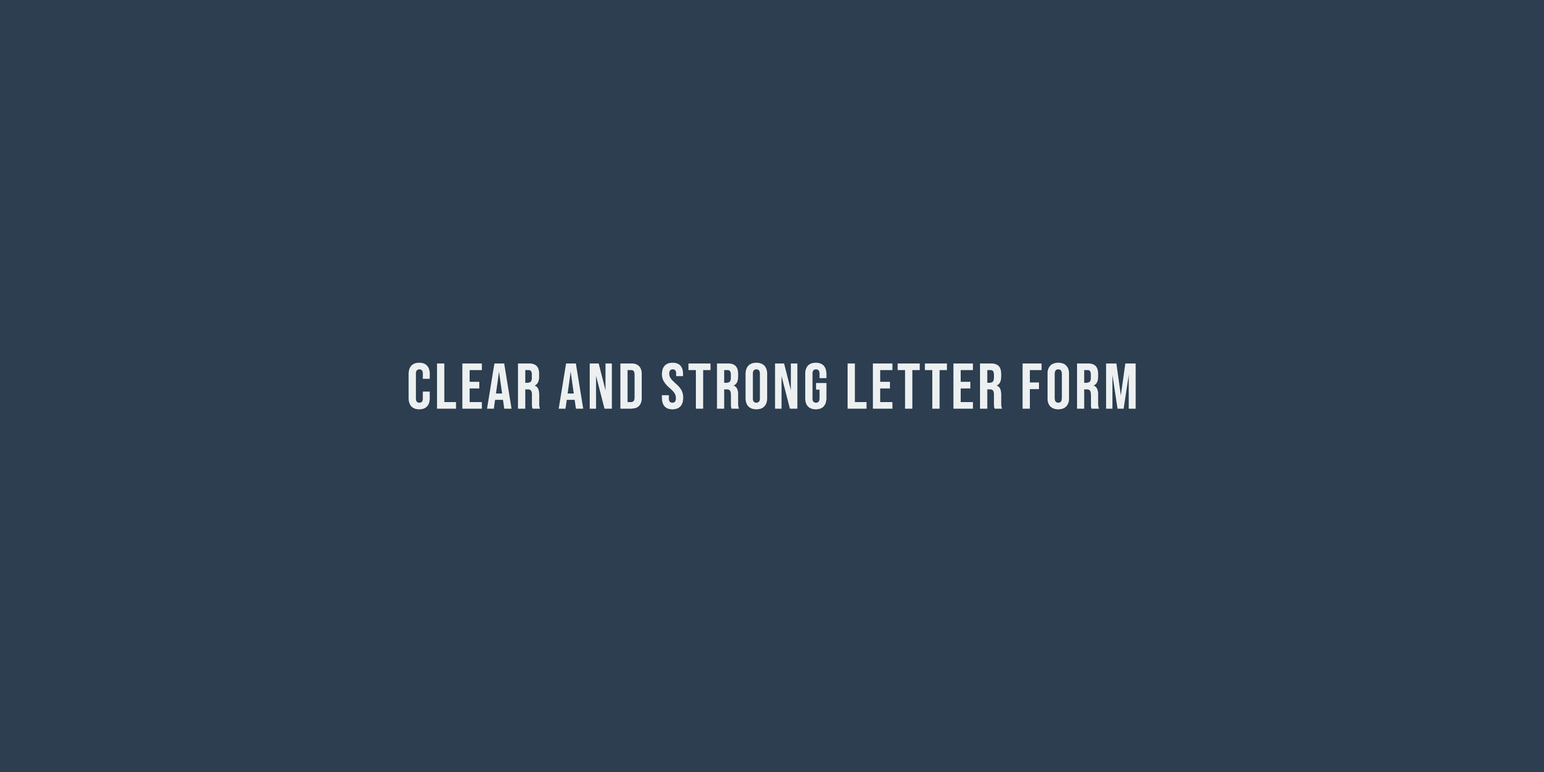
<style>
.page{position:relative;width:1544px;height:772px;background:#2c3e50}
.page>*{position:absolute;margin:0}
.t1{font:64.3px "BebasNeue-Regular";letter-spacing:0.05em;color:#ecf0f1}
</style>
<div class="page">
<p class="t1" style="left:409px;top:362px;width:727px;height:48px">clear and strong letter form</p>
</div>
